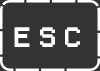
<style>
.page{position:relative;width:100px;height:71px;background:#333333}
.page>*{position:absolute;margin:0}
.t1{font:25px "PixelSplitter-Bold";color:#ffffff}
</style>
<div class="page">
<p class="t1" style="left:14px;top:27px;width:66px;height:20px">E s c</p>
</div>
